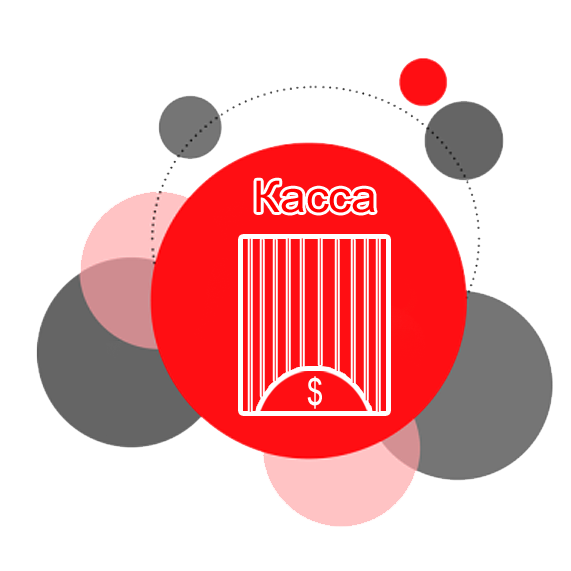
<style>
.page{position:relative;width:571px;height:571px;background:#ffffff}
.page>*{position:absolute;margin:0}
.t1{font:43.4px "ArialMT";color:#ff0000;scale:1.05 1}
.t2{font:37.5px "ArialMT";color:#ffffff;scale:0.8 1}
</style>
<div class="page">
<p class="t1" style="left:256px;top:180px;width:119px;height:33px">Касса</p>
<p class="t2" style="left:307px;top:376px;width:15px;height:33px">$</p>
</div>
